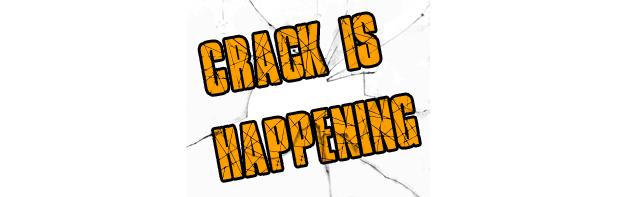
<style>
.page{position:relative;width:640px;height:197px;background:#ffffff}
.page>*{position:absolute;margin:0}
.t1{font:72px "BrokenGlass";color:#ffa200}
</style>
<div class="page">
<p class="t1" style="left:200px;top:14px;width:219px;height:166px;text-align:center;rotate:-10deg">Crack is <br>happening</p>
</div>
